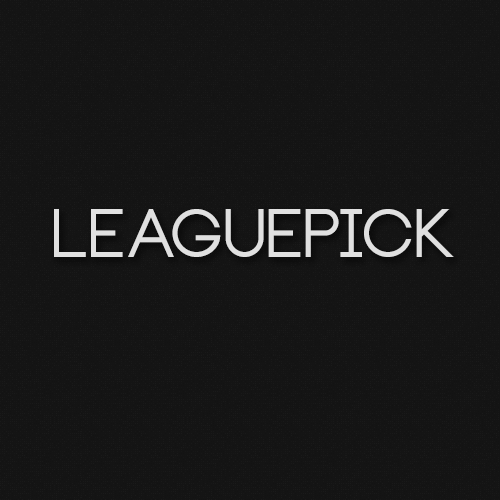
<style>
.page{position:relative;width:500px;height:500px;background:#141414}
.page>*{position:absolute;margin:0}
.t1{font:67px "Neou-Bold";color:#e8eaea}
</style>
<div class="page">
<p class="t1" style="left:54px;top:209px;width:400px;height:48px">LEAGUEPICK</p>
</div>
